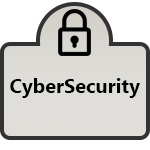
<style>
.page{position:relative;width:150px;height:150px;background:#ffffff}
.page>*{position:absolute;margin:0}
.t1{font:20px "Gadugi-Bold";color:#000000}
</style>
<div class="page">
<p class="t1" style="left:10px;top:78px;width:130px;height:20px">CyberSecurity</p>
</div>
